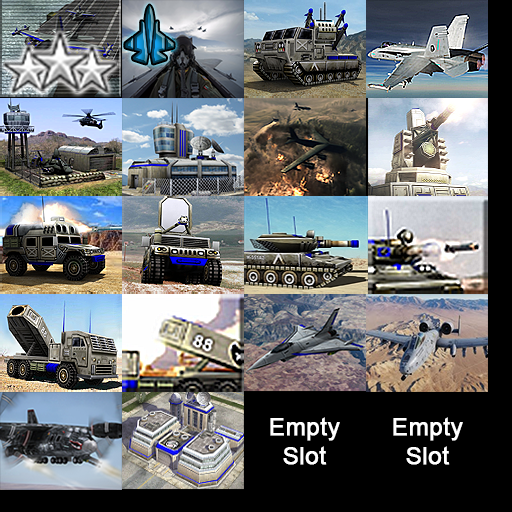
<style>
.page{position:relative;width:512px;height:512px}
.page>*{position:absolute;margin:0}
.t1{font:24px "ArialMT";color:#ffffff;font-weight:bold}
</style>
<div class="page">
<p class="t1" style="left:270px;top:417px;width:70px;height:48px;text-align:center">Empty<br>Slot</p>
<p class="t1" style="left:393px;top:417px;width:70px;height:48px;text-align:center">Empty<br>Slot</p>
</div>
